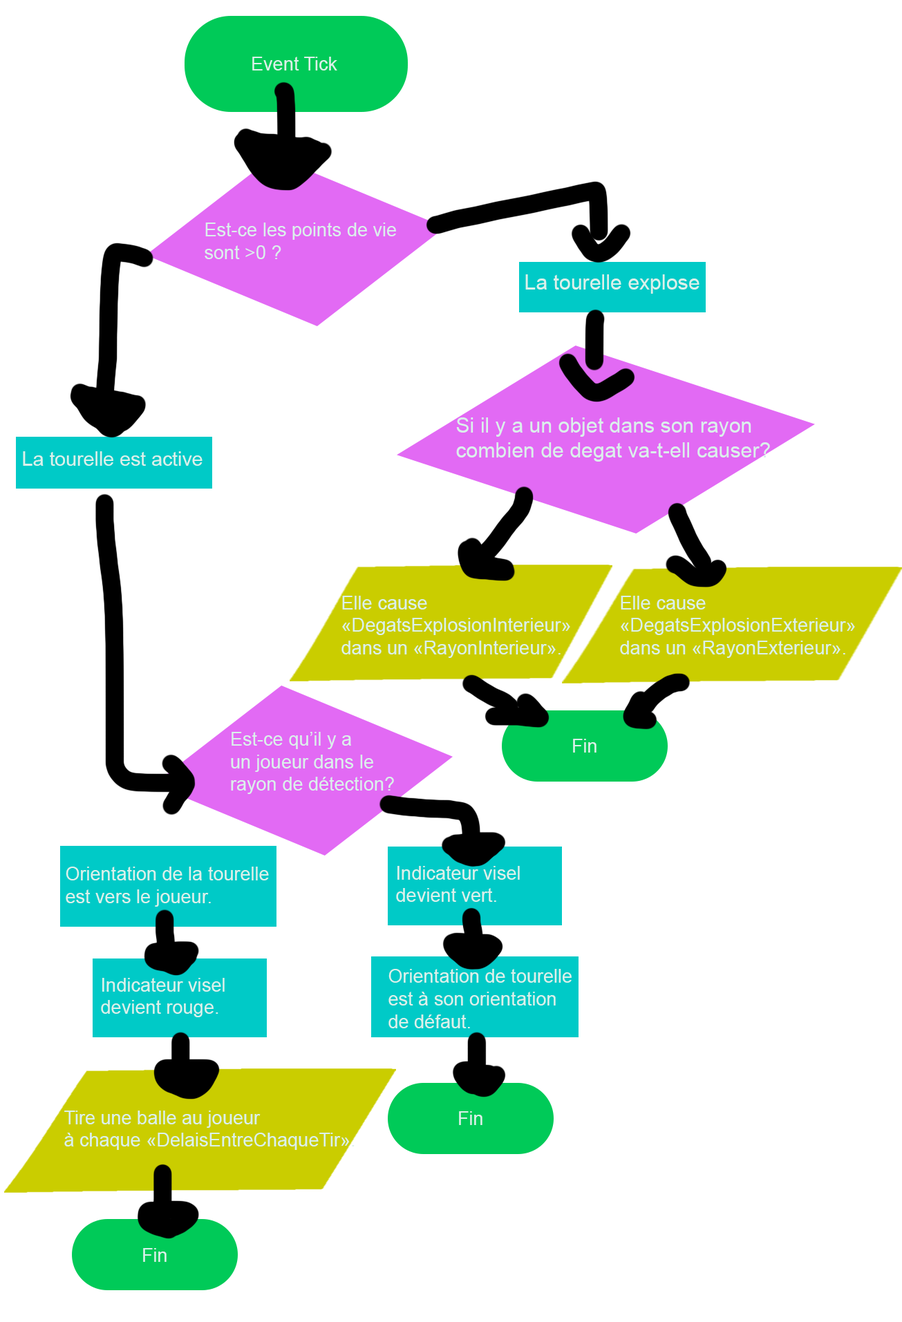
<style>
.page{position:relative;width:902px;height:1322px;background:#ffffff}
.page>*{position:absolute;margin:0}
.t1{font:18.7px "ArialMT";color:#dbf1eb}
.t2{font:20.9px "ArialMT";color:#dbf1eb}
</style>
<div class="page">
<p class="t1" style="left:252px;top:57px;width:85px;height:13px">Event Tick</p>
<p class="t1" style="left:205px;top:223px;width:191px;height:36px">Est-ce les points de vie<br>sont &gt;0 ?</p>
<p class="t2" style="left:525px;top:274px;width:174px;height:20px">La tourelle explose</p>
<p class="t2" style="left:456px;top:417px;width:314px;height:45px">Si il y a un objet dans son rayon<br>combien de degat va-t-ell causer?</p>
<p class="t1" style="left:23px;top:451px;width:179px;height:15px">La tourelle est active</p>
<p class="t1" style="left:341px;top:596px;width:229px;height:62px">Elle cause <br>«DegatsExplosionInterieur» <br>dans un «RayonInterieur».</p>
<p class="t1" style="left:620px;top:596px;width:235px;height:62px">Elle cause <br>«DegatsExplosionExterieur» <br>dans un «RayonExterieur».</p>
<p class="t1" style="left:231px;top:732px;width:163px;height:62px">Est-ce qu’il y a<br>un joueur dans le <br>rayon de détection?</p>
<p class="t1" style="left:573px;top:739px;width:23px;height:14px">Fin</p>
<p class="t1" style="left:66px;top:867px;width:203px;height:40px">Orientation de la tourelle<br>est vers le joueur.</p>
<p class="t1" style="left:396px;top:866px;width:124px;height:36px">Indicateur visel<br>devient vert.</p>
<p class="t1" style="left:101px;top:978px;width:124px;height:39px">Indicateur visel<br>devient rouge.</p>
<p class="t1" style="left:388px;top:969px;width:184px;height:59px">Orientation de tourelle<br>est à son orientation <br>de défaut.</p>
<p class="t1" style="left:64px;top:1111px;width:291px;height:39px">Tire une balle au joueur<br>à chaque «DelaisEntreChaqueTir».</p>
<p class="t1" style="left:459px;top:1111px;width:23px;height:14px">Fin</p>
<p class="t1" style="left:143px;top:1248px;width:24px;height:14px">Fin</p>
</div>
